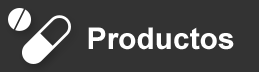
<style>
.page{position:relative;width:259px;height:72px;background:#333333}
.page>*{position:absolute;margin:0}
.t1{font:30px "Arial-BoldMT";color:#ffffff}
</style>
<div class="page">
<p class="t1" style="left:88px;top:27px;width:146px;height:23px">Productos</p>
</div>
